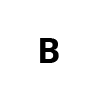
<style>
.page{position:relative;width:100px;height:100px;background:#ffffff}
.page>*{position:absolute;margin:0}
.t1{font:35px "OpenSans-Bold";color:#000000}
</style>
<div class="page">
<p class="t1" style="left:40px;top:38px;width:19px;height:25px">B</p>
</div>
